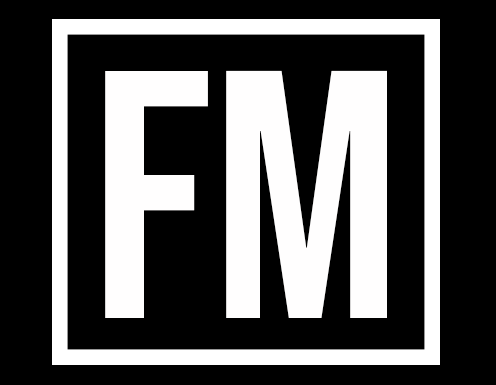
<style>
.page{position:relative;width:496px;height:385px;background:#000000}
.page>*{position:absolute;margin:0}
.t1{font:352.7px "BebasNeue-Regular";color:#fffefe}
</style>
<div class="page">
<p class="t1" style="left:105px;top:70px;width:282px;height:248px">FM</p>
</div>
